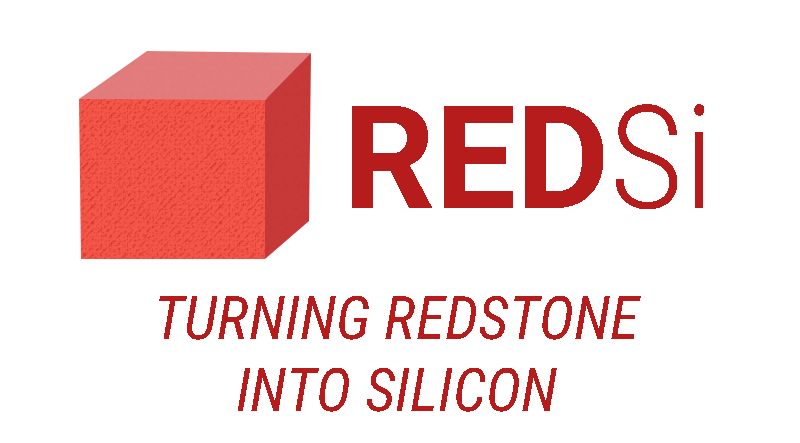
<style>
.page{position:relative;width:800px;height:443px;background:#ffffff}
.page>*{position:absolute;margin:0}
.t1{font:144px "Roboto-Bold";color:#b71c1c}
.t2{font:144px "RobotoCondensed-Light";color:#b71c1c}
.t3{font:60px "RobotoCondensed-Italic";color:#b71c1c}
</style>
<div class="page">
<p class="t1" style="left:352px;top:104px;width:352px;height:105px">RED<span class="t2">Si</span></p>
<p class="t3" style="left:159px;top:296px;width:482px;height:116px;text-align:center">TURNING REDSTONE <br>INTO SILICON</p>
</div>
